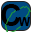
<style>
.page{position:relative;width:32px;height:32px;background:#004a80}
.page>*{position:absolute;margin:0}
.t1{font:30px "Arial-BoldMT";color:#000000}
.t2{font:12px "Arial-BoldMT";color:#000000}
</style>
<div class="page">
<p class="t1" style="left:1px;top:4px;width:20px;height:22px">C</p>
<p class="t2" style="left:18px;top:17px;width:12px;height:9px">W</p>
</div>
